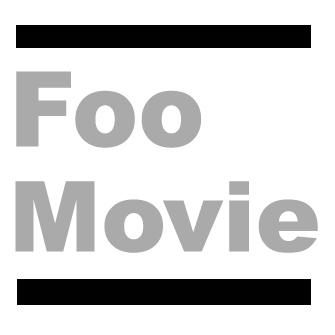
<style>
.page{position:relative;width:335px;height:335px;background:#ffffff}
.page>*{position:absolute;margin:0}
.t1{font:104.5px "Arial-Black";color:#aaaaaa;scale:0.95 1}
.t2{font:97.9px "Arial-Black";color:#aaaaaa}
</style>
<div class="page">
<p class="t1" style="left:16px;top:71px;width:186px;height:77px">Foo</p>
<p class="t2" style="left:15px;top:181px;width:303px;height:72px">Movie</p>
</div>
